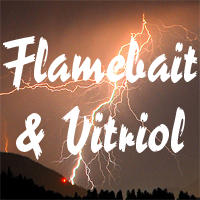
<style>
.page{position:relative;width:200px;height:200px}
.page>*{position:absolute;margin:0}
.t1{font:58.3px "ReporterLTStd-2";color:#ffffff}
</style>
<div class="page">
<p class="t1" style="left:3px;top:36px;width:195px;height:124px;text-align:center">Flamebait<br>&amp; Vitriol</p>
</div>
